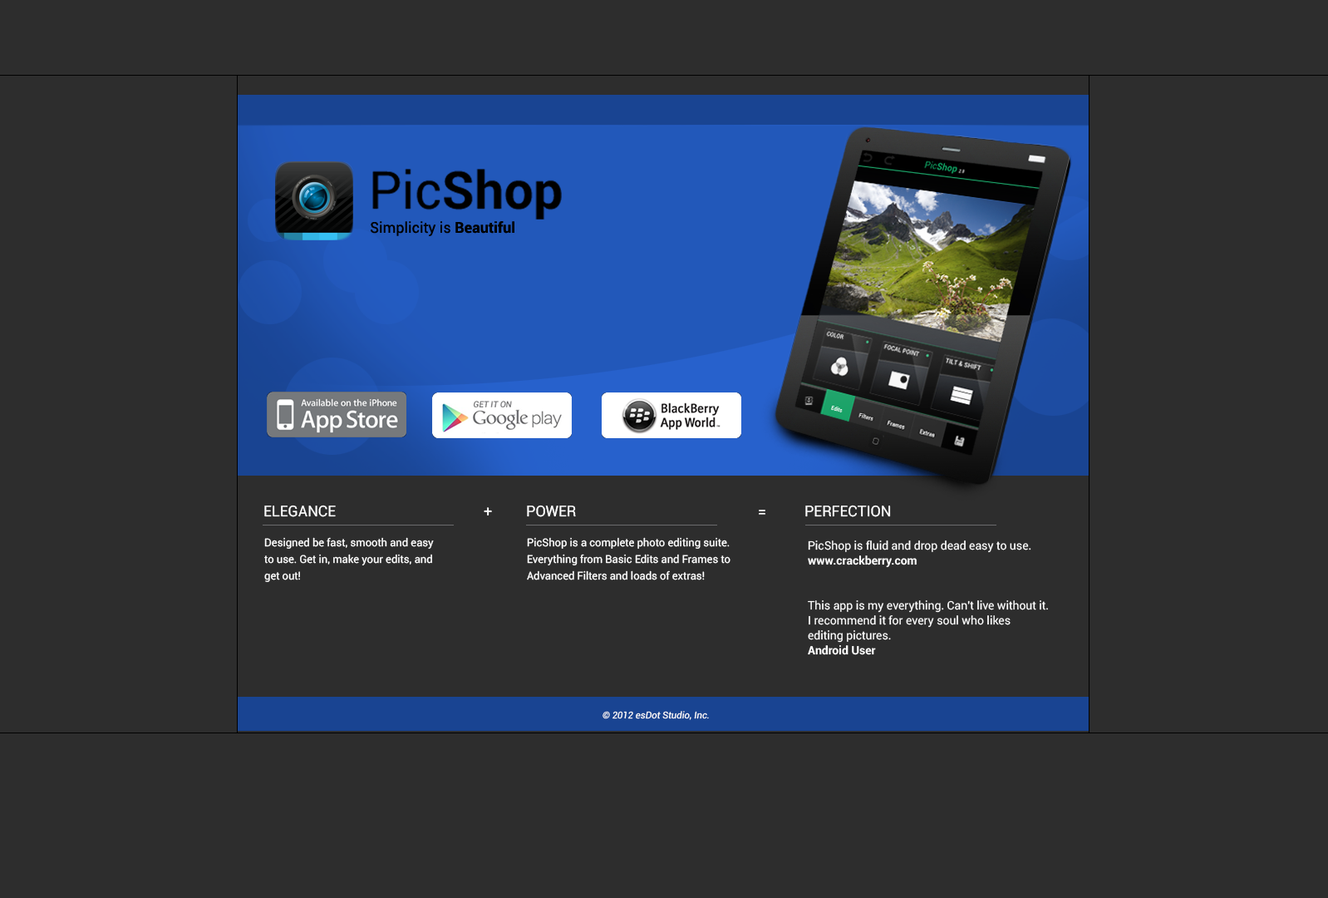
<style>
.page{position:relative;width:1328px;height:898px;background:#2d2d2d}
.page>*{position:absolute;margin:0}
.t1{font:15px "Roboto-Regular";color:#ffffff}
.t2{font:10.8px/16.6px "Roboto-Regular";color:#ffffff}
.t3{font:11.6px/15px "Roboto-Regular";color:#ffffff}
.t4{font:11.6px/15px "Roboto-Bold";color:#ffffff}
.t5{font:9.4px "Roboto-Italic";color:#ffffff}
</style>
<div class="page">
<p class="t1" style="left:264px;top:505px;width:72px;height:12px">ELEGANCE</p>
<p class="t1" style="left:484px;top:507px;width:8px;height:8px">+</p>
<p class="t1" style="left:527px;top:505px;width:49px;height:12px">POWER</p>
<p class="t1" style="left:759px;top:510px;width:7px;height:5px">=</p>
<p class="t1" style="left:805px;top:505px;width:86px;height:12px">PERFECTION</p>
<p class="t2" style="left:264px;top:537px;width:170px;height:45px">Designed be fast, smooth and easy to use. Get in, make your edits, and get out!</p>
<p class="t2" style="left:527px;top:537px;width:204px;height:43px">PicShop is a complete photo editing suite. Everything from Basic Edits and Frames to Advanced Filters and loads of extras!</p>
<p class="t3" style="left:808px;top:540px;width:240px;height:115px">PicShop is fluid and drop dead easy to use. <br><span class="t4">www.crackberry.com<br><br><br></span>This app is my everything. Can't live without it. <br>I recommend it for every soul who likes <br>editing pictures.  <br><span class="t4">Android User</span></p>
<p class="t5" style="left:603px;top:711px;width:106px;height:9px">© 2012 esDot Studio, Inc.</p>
</div>
